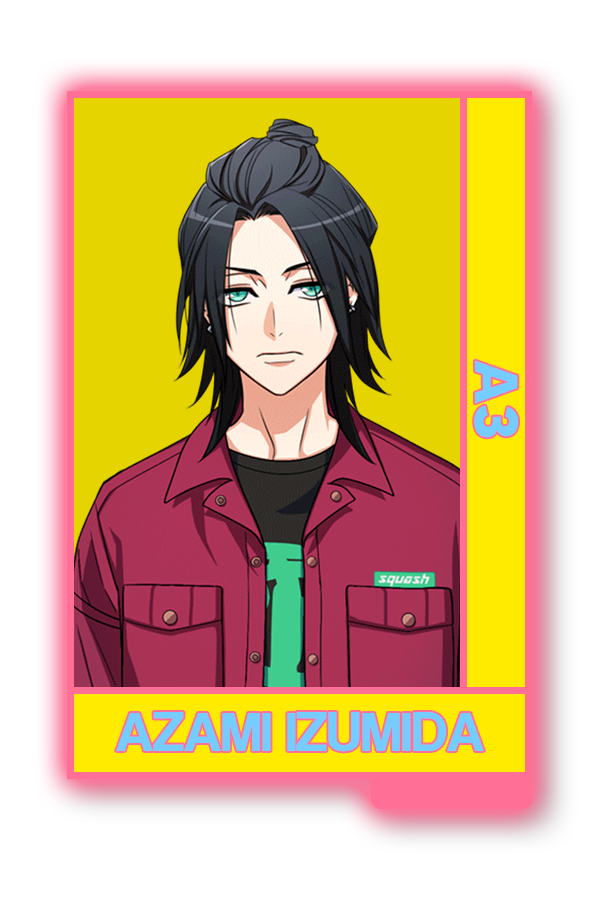
<style>
.page{position:relative;width:600px;height:900px;background:#ffffff}
.page>*{position:absolute;margin:0}
.t1{font:60.5px "MADETOMMY-Bold";color:#74ccff}
.t2{font:57.7px "CoolveticaRg-Regular";color:#74ccff}
</style>
<div class="page">
<p class="t1" style="left:474px;top:360px;width:44px;height:78px;rotate:90deg">A3</p>
<p class="t2" style="left:116px;top:712px;width:368px;height:40px">AZAMI IZUMIDA</p>
</div>
